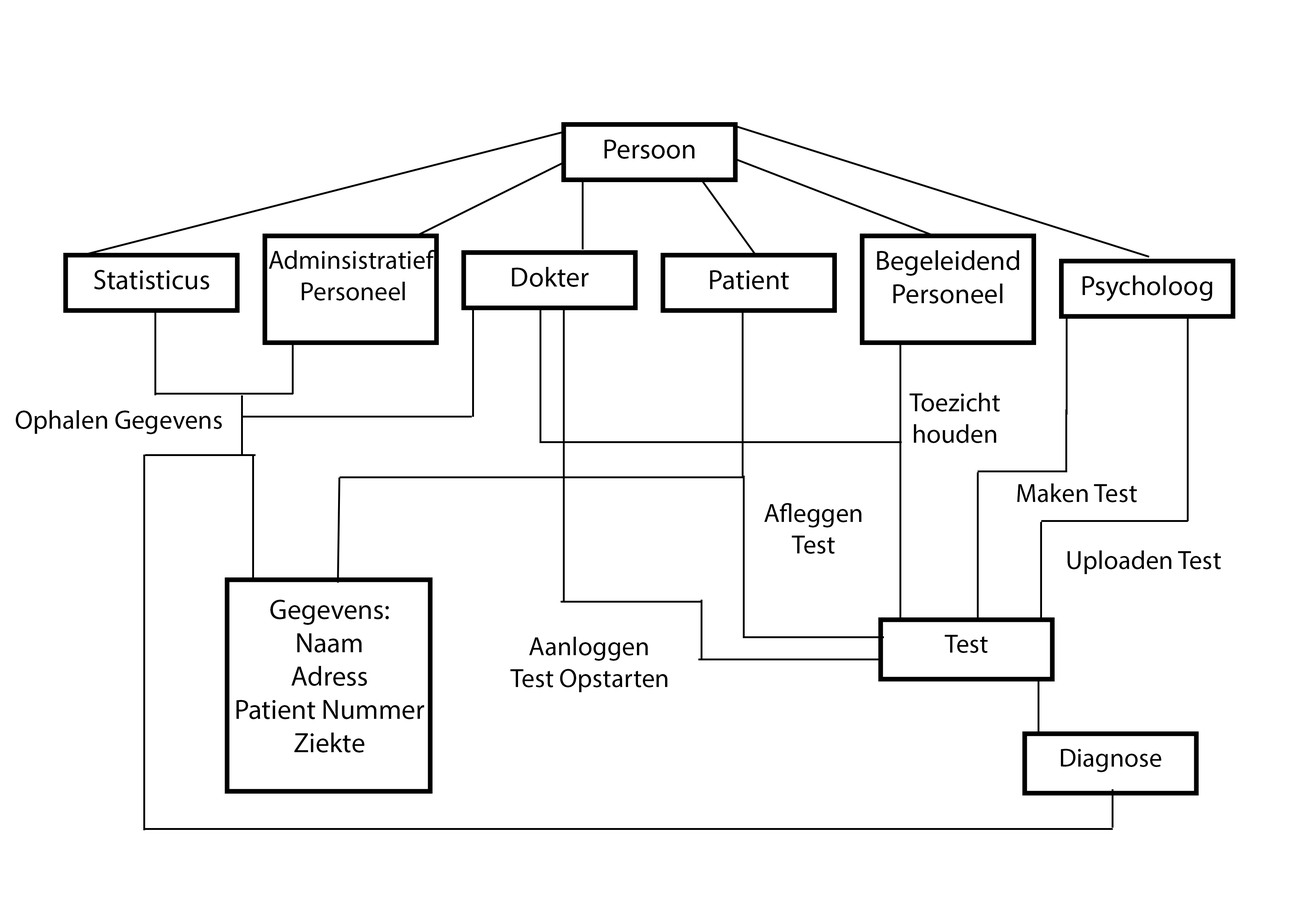
<style>
.page{position:relative;width:1299px;height:918px;background:#ffffff}
.page>*{position:absolute;margin:0}
.t1{font:27.8px "MyriadPro-Regular";color:#000000}
.t2{font:26.2px "MyriadPro-Regular";color:#000000}
</style>
<div class="page">
<p class="t1" style="left:604px;top:140px;width:91px;height:19px">Persoon</p>
<p class="t2" style="left:269px;top:250px;width:166px;height:51px;text-align:center">Adminsistratief<br> Personeel</p>
<p class="t1" style="left:877px;top:250px;width:142px;height:54px;text-align:center">Begeleidend Personeel</p>
<p class="t1" style="left:94px;top:270px;width:115px;height:20px">Statisticus</p>
<p class="t1" style="left:512px;top:267px;width:77px;height:20px">Dokter</p>
<p class="t1" style="left:710px;top:270px;width:79px;height:20px">Patient</p>
<p class="t1" style="left:1082px;top:275px;width:130px;height:26px">Psycholoog</p>
<p class="t2" style="left:909px;top:393px;width:91px;height:50px;text-align:center">Toezicht houden</p>
<p class="t2" style="left:16px;top:410px;width:206px;height:24px">Ophalen Gegevens</p>
<p class="t2" style="left:1017px;top:484px;width:120px;height:18px">Maken Test</p>
<p class="t2" style="left:764px;top:503px;width:98px;height:51px;text-align:center">Afleggen <br>Test</p>
<p class="t2" style="left:1067px;top:551px;width:154px;height:23px">Uploaden Test</p>
<p class="t1" style="left:236px;top:600px;width:188px;height:153px;text-align:center">Gegevens:<br>Naam<br>Adress<br>Patient Nummer<br>Ziekte</p>
<p class="t2" style="left:529px;top:637px;width:119px;height:24px">Aanloggen</p>
<p class="t2" style="left:944px;top:635px;width:43px;height:18px">Test</p>
<p class="t2" style="left:510px;top:669px;width:158px;height:23px">Test Opstarten</p>
<p class="t2" style="left:1061px;top:749px;width:100px;height:23px">Diagnose</p>
</div>
